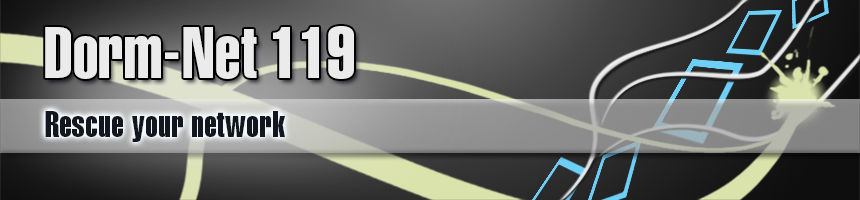
<style>
.page{position:relative;width:860px;height:200px}
.page>*{position:absolute;margin:0}
.t1{font:72px "Helvetica-ExtraCompressed";color:#ebebeb;scale:1.07 1}
.t2{font:36px "Helvetica-ExtraCompressed";letter-spacing:0.005em;color:#14161f;scale:1.07 1}
</style>
<div class="page">
<p class="t1" style="left:45px;top:26px;width:309px;height:53px">Dorm-Net 119</p>
<p class="t2" style="left:45px;top:111px;width:240px;height:31px">Rescue your network</p>
</div>
